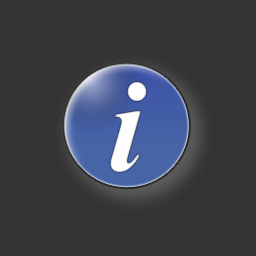
<style>
.page{position:relative;width:256px;height:256px;background:#333333}
.page>*{position:absolute;margin:0}
.t1{font:160px "Vijaya-Bold";color:#fffefe}
</style>
<div class="page">
<p class="t1" style="left:110px;top:82px;width:37px;height:90px">i</p>
</div>
